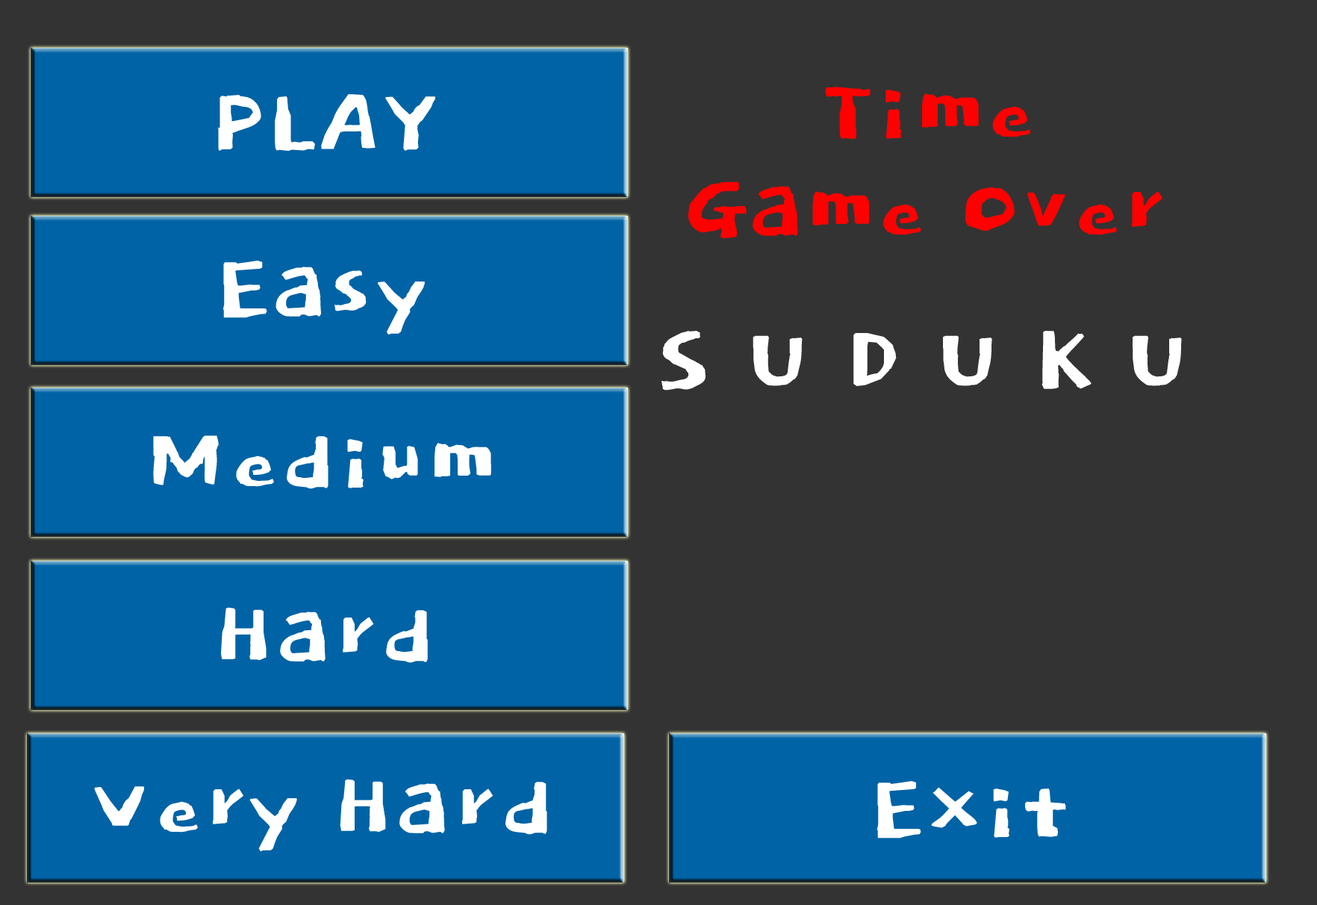
<style>
.page{position:relative;width:1317px;height:905px;background:#333333}
.page>*{position:absolute;margin:0}
.t1{font:112px "Dokdo-Regular";color:#ff0000}
.t2{font:112px "Dokdo-Regular";color:#ffffff}
</style>
<div class="page">
<p class="t1" style="left:825px;top:87px;width:206px;height:53px">Time</p>
<p class="t2" style="left:217px;top:94px;width:218px;height:57px">PLAY</p>
<p class="t1" style="left:688px;top:181px;width:476px;height:57px">Game Over</p>
<p class="t2" style="left:223px;top:261px;width:202px;height:74px">Easy</p>
<p class="t2" style="left:662px;top:330px;width:520px;height:61px">S U D U K U</p>
<p class="t2" style="left:153px;top:435px;width:338px;height:54px">Medium</p>
<p class="t2" style="left:220px;top:607px;width:208px;height:56px">Hard</p>
<p class="t2" style="left:94px;top:779px;width:453px;height:72px">Very Hard</p>
<p class="t2" style="left:877px;top:781px;width:189px;height:58px">Exit</p>
</div>
